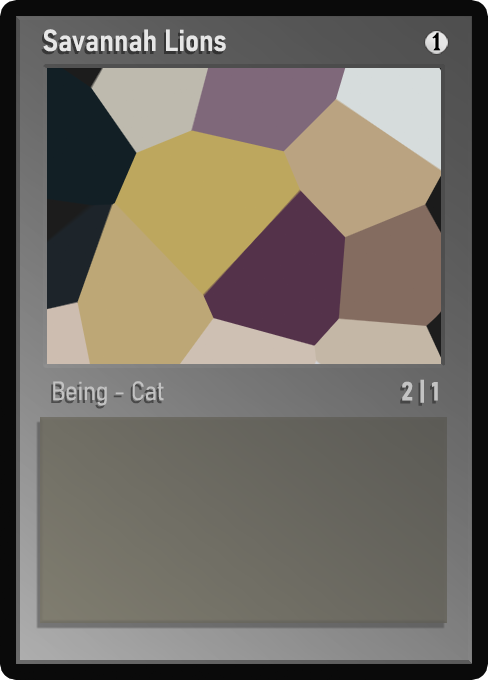
<style>
.page{position:relative;width:488px;height:680px}
.page>*{position:absolute;margin:0}
.t1{font:30px "Bahnschrift-SemiBoldSemiCondensed";color:#f2f2f2;font-weight:bold}
.t2{font:25px "WTRRoycroft";color:#000000;font-weight:bold;scale:1.09 1}
.t3{font:26px "Bahnschrift-LightSemiCondensed";color:#c8c8c8;font-weight:bold}
.t4{font:26px "Bahnschrift-BoldSemiCondensed";color:#c3c3c3;font-weight:bold}
</style>
<div class="page">
<p class="t1" style="left:43px;top:29px;width:183px;height:23px;opacity:0.9">Savannah Lions</p>
<p class="t2" style="left:432px;top:32px;width:9px;height:19px">1</p>
<p class="t3" style="left:53px;top:381px;width:111px;height:25px;opacity:0.9">Being - Cat</p>
<p class="t4" style="left:402px;top:379px;width:36px;height:24px">2 | 1</p>
</div>
